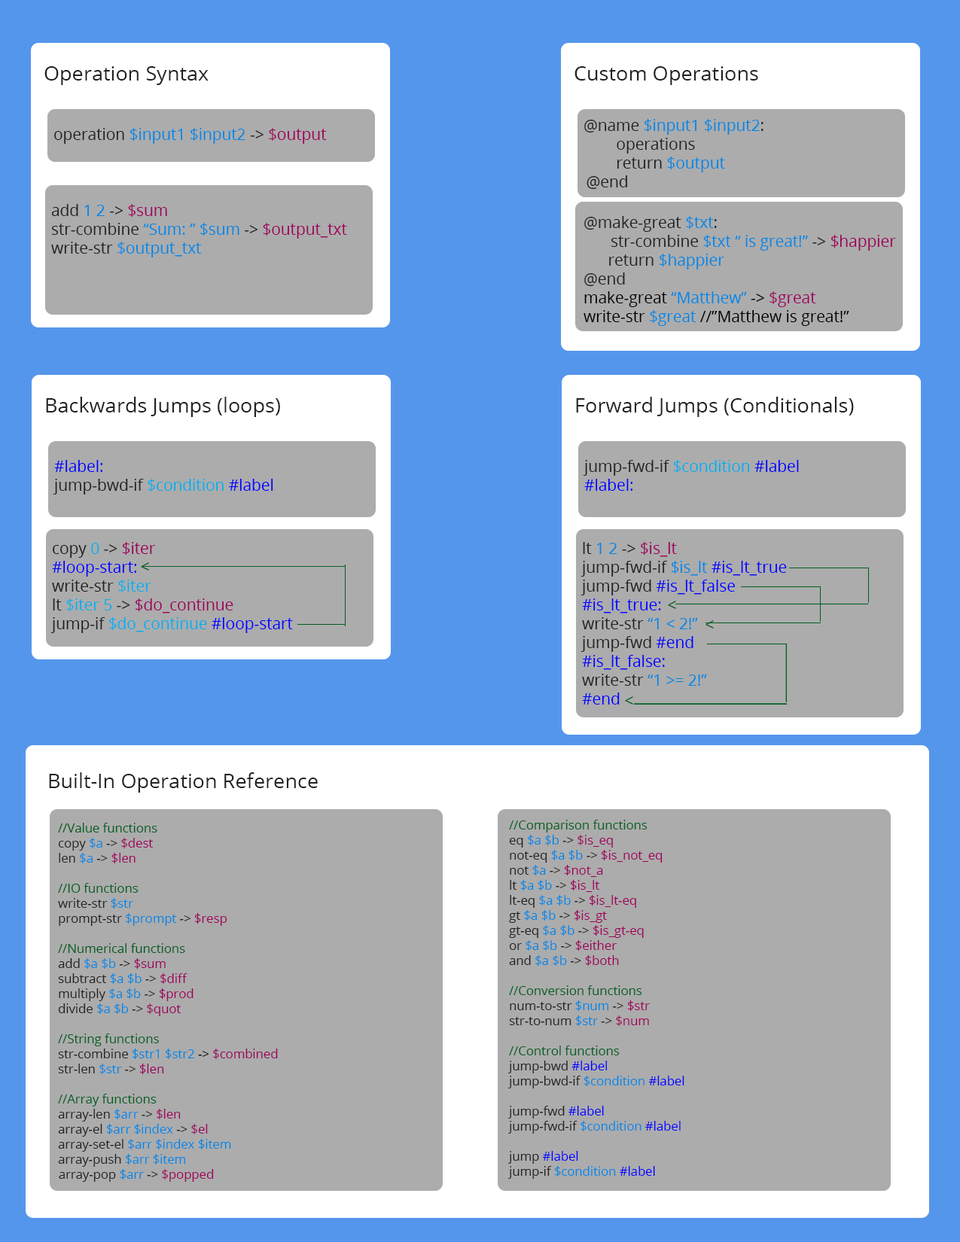
<style>
.page{position:relative;width:960px;height:1242px;background:#acacac}
.page>*{position:absolute;margin:0}
.t1{font:20.4px "OpenSans";color:#222222}
.t2{font:15.7px "OpenSans";color:#222222}
.t3{font:15.7px "OpenSans";color:#0087e5}
.t4{font:15.7px "OpenSans";color:#9e005d}
.t5{font:15.7px "OpenSans";color:#000000}
.t6{font:15.7px "OpenSans";color:#0000ff}
.t7{font:15.7px "OpenSans";color:#00aeef}
.t8{font:15.7px "OpenSans";color:#005e20}
.t9{font:12.5px "OpenSans";color:#005e20}
.t10{font:12.5px "OpenSans";color:#232323}
.t11{font:12.5px "OpenSans";color:#0087e5}
.t12{font:12.5px "OpenSans";color:#9e005d}
.t13{font:12.5px "OpenSans";color:#0000ff}
.t14{font:20.4px "OpenSans";color:#232323}
.t15{font:12.5px "OpenSans";color:#000000}
</style>
<div class="page">
<p class="t1" style="left:44px;top:66px;width:165px;height:19px">Operation Syntax</p>
<p class="t1" style="left:574px;top:66px;width:184px;height:19px">Custom Operations</p>
<p class="t2" style="left:584px;top:119px;width:179px;height:70px">@name <span class="t3">$input1 $input2</span>:<br>        operations<br>        return <span class="t3">$output<br></span>@end</p>
<p class="t3" style="left:54px;top:128px;width:273px;height:16px"><span class="t2"><br>operation </span>$input1 $input2 <span class="t2">-&gt; </span><span class="t4">$output</span></p>
<p class="t3" style="left:51px;top:204px;width:296px;height:53px"><span class="t2"><br>add </span>1 2 <span class="t2">-&gt; </span><span class="t4">$sum<br></span><span class="t2">str-combine </span>“Sum: ” $sum <span class="t2">-&gt; </span><span class="t4">$output_txt<br></span><span class="t2">write-str </span>$output_txt</p>
<p class="t5" style="left:583px;top:216px;width:313px;height:110px"><span class="t2"><br>@make-great </span><span class="t3">$txt</span><span class="t2">:<br> str-combine </span><span class="t3">$txt “ is great!” </span><span class="t2">-&gt; </span><span class="t4">$happier<br></span><span class="t2">      return </span><span class="t3">$happier<br></span><span class="t2">@end<br></span>make-great <span class="t3">“Matthew” </span>-&gt; <span class="t4">$great<br></span>write-str <span class="t3">$great </span>//”Matthew is great!”</p>
<p class="t1" style="left:46px;top:397px;width:234px;height:20px">Backwards Jumps (loops)</p>
<p class="t1" style="left:576px;top:397px;width:278px;height:20px">Forward Jumps (Conditionals)</p>
<p class="t2" style="left:53px;top:460px;width:220px;height:35px"><span class="t6">#label:<br></span>jump-bwd-if <span class="t7">$condition </span><span class="t6">#label</span></p>
<p class="t6" style="left:583px;top:460px;width:216px;height:31px"><span class="t8"><br></span><span class="t2">jump-fwd-if </span><span class="t7">$condition </span>#label<br>#label:</p>
<p class="t6" style="left:50px;top:542px;width:243px;height:91px"><span class="t2"><br>copy </span><span class="t7">0</span><span class="t2"> -&gt; </span><span class="t4">$iter<br></span>#loop-start:<br><span class="t2">write-str </span><span class="t7">$iter<br></span><span class="t2">lt </span><span class="t7">$iter 5</span><span class="t2"> -&gt; </span><span class="t4">$do_continue<br></span><span class="t2">jump-if </span><span class="t7">$do_continue </span>#loop-start</p>
<p class="t6" style="left:580px;top:542px;width:207px;height:163px"><span class="t2"><br>lt</span><span class="t3"> 1 2 </span><span class="t2">-&gt; </span><span class="t4">$is_lt<br></span><span class="t2">jump-fwd-if </span><span class="t3">$is_lt </span>#is_lt_true<br><span class="t2">jump-fwd </span>#is_lt_false<br>#is_lt_true:<br><span class="t2">write-str </span><span class="t3">“1 &lt; 2!”<br></span><span class="t2">jump-fwd </span>#end<br>#is_lt_false:<br><span class="t2">write-str </span><span class="t3">“1 &gt;= 2!”<br></span>#end</p>
<p class="t8" style="left:141px;top:562px;width:8px;height:9px">&lt;</p>
<p class="t8" style="left:668px;top:601px;width:8px;height:8px">&lt;</p>
<p class="t8" style="left:705px;top:620px;width:9px;height:9px">&lt;</p>
<p class="t8" style="left:625px;top:696px;width:8px;height:9px">&lt;</p>
<p class="t1" style="left:49px;top:772px;width:269px;height:21px">Built-In Operation Reference</p>
<p class="t9" style="left:508px;top:820px;width:176px;height:359px"><span class="t10"><br></span>//Comparison functions<br><span class="t10">eq </span><span class="t11">$a $b </span><span class="t10">-&gt; </span><span class="t12">$is_eq<br></span><span class="t10">not-eq </span><span class="t11">$a $b </span><span class="t10">-&gt; </span><span class="t12">$is_not_eq<br></span><span class="t10">not </span><span class="t11">$a </span><span class="t10">-&gt; </span><span class="t12">$not_a<br></span><span class="t10">lt </span><span class="t11">$a $b </span><span class="t10">-&gt; </span><span class="t12">$is_lt<br></span><span class="t10">lt-eq </span><span class="t11">$a $b </span><span class="t10">-&gt; </span><span class="t12">$is_lt-eq<br></span><span class="t10">gt </span><span class="t11">$a $b </span><span class="t10">-&gt; </span><span class="t12">$is_gt<br></span><span class="t10">gt-eq </span><span class="t11">$a $b </span><span class="t10">-&gt; </span><span class="t12">$is_gt-eq<br></span><span class="t10">or </span><span class="t11">$a $b </span><span class="t10">-&gt; </span><span class="t12">$either<br></span><span class="t10">and </span><span class="t11">$a $b </span><span class="t10">-&gt; </span><span class="t12">$both<br></span><br>//Conversion functions<br><span class="t10">num-to-str </span><span class="t11">$num </span><span class="t10">-&gt; </span><span class="t12">$str<br></span><span class="t10">str-to-num </span><span class="t11">$str </span><span class="t10">-&gt; </span><span class="t12">$num<br><br></span>//Control functions<br><span class="t10">jump-bwd </span><span class="t13">#label<br></span><span class="t10">jump-bwd-if </span><span class="t11">$condition </span><span class="t13">#label<br></span><span class="t10"><br>jump-fwd </span><span class="t13">#label<br></span><span class="t10">jump-fwd-if </span><span class="t11">$condition </span><span class="t13">#label<br></span><span class="t10"><br>jump </span><span class="t13">#label<br></span><span class="t10">jump-if </span><span class="t11">$condition </span><span class="t13">#label</span></p>
<p class="t9" style="left:58px;top:823px;width:220px;height:359px"><span class="t14"><br></span>//Value functions<br><span class="t10">copy </span><span class="t11">$a </span><span class="t10">-&gt; </span><span class="t12">$dest</span><span class="t10"><br>len </span><span class="t11">$a </span><span class="t10">-&gt; </span><span class="t12">$len<br><br></span>//IO functions<br><span class="t10">write-str </span><span class="t11">$str<br></span><span class="t10">prompt-str </span><span class="t11">$prompt </span><span class="t10">-&gt; </span><span class="t12">$resp<br><br></span>//Numerical functions<br><span class="t10">add </span><span class="t11">$a $b </span><span class="t10">-&gt; </span><span class="t12">$sum<br></span><span class="t10">subtract </span><span class="t11">$a $b </span><span class="t10">-&gt; </span><span class="t12">$diff<br></span><span class="t10">multiply </span><span class="t11">$a $b </span><span class="t10">-&gt; </span><span class="t12">$prod<br></span><span class="t10">divide </span><span class="t11">$a $b </span><span class="t10">-&gt; </span><span class="t12">$quot<br><br></span>//String functions<br><span class="t10">str-combine </span><span class="t11">$str1 $str2 </span><span class="t15">-&gt; </span><span class="t12">$combined<br></span><span class="t10">str-len </span><span class="t11">$str </span><span class="t10">-&gt; </span><span class="t12">$len<br><br></span>//Array functions<br><span class="t10">array-len </span><span class="t11">$arr </span><span class="t10">-&gt; </span><span class="t12">$len<br></span><span class="t10">array-el </span><span class="t11">$arr $index </span><span class="t10">-&gt; </span><span class="t12">$el<br></span><span class="t10">array-set-el </span><span class="t11">$arr $index $item<br></span><span class="t10">array-push </span><span class="t11">$arr $item<br></span><span class="t10">array-pop </span><span class="t11">$arr </span><span class="t10">-&gt; </span><span class="t12">$popped</span></p>
</div>
